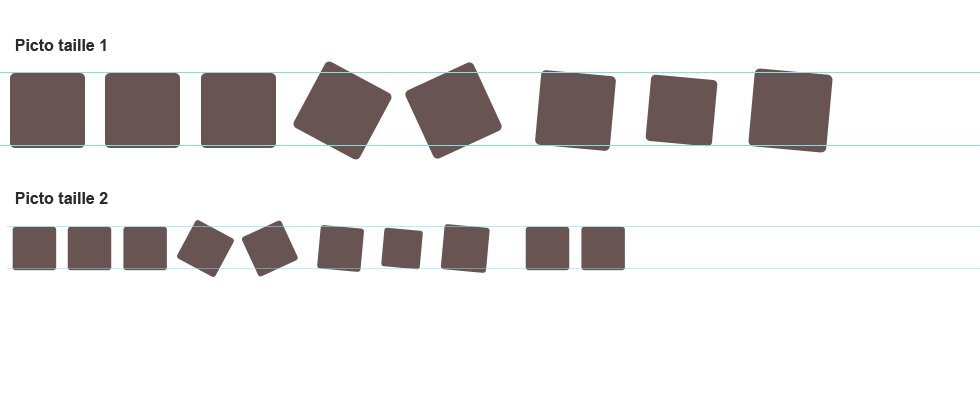
<style>
.page{position:relative;width:980px;height:401px;background:#ffffff}
.page>*{position:absolute;margin:0}
.t1{font:16px "Arial-BoldMT";color:#2b2b2b}
</style>
<div class="page">
<p class="t1" style="left:15px;top:39px;width:91px;height:12px">Picto taille 1</p>
<p class="t1" style="left:15px;top:192px;width:93px;height:12px">Picto taille 2</p>
</div>
